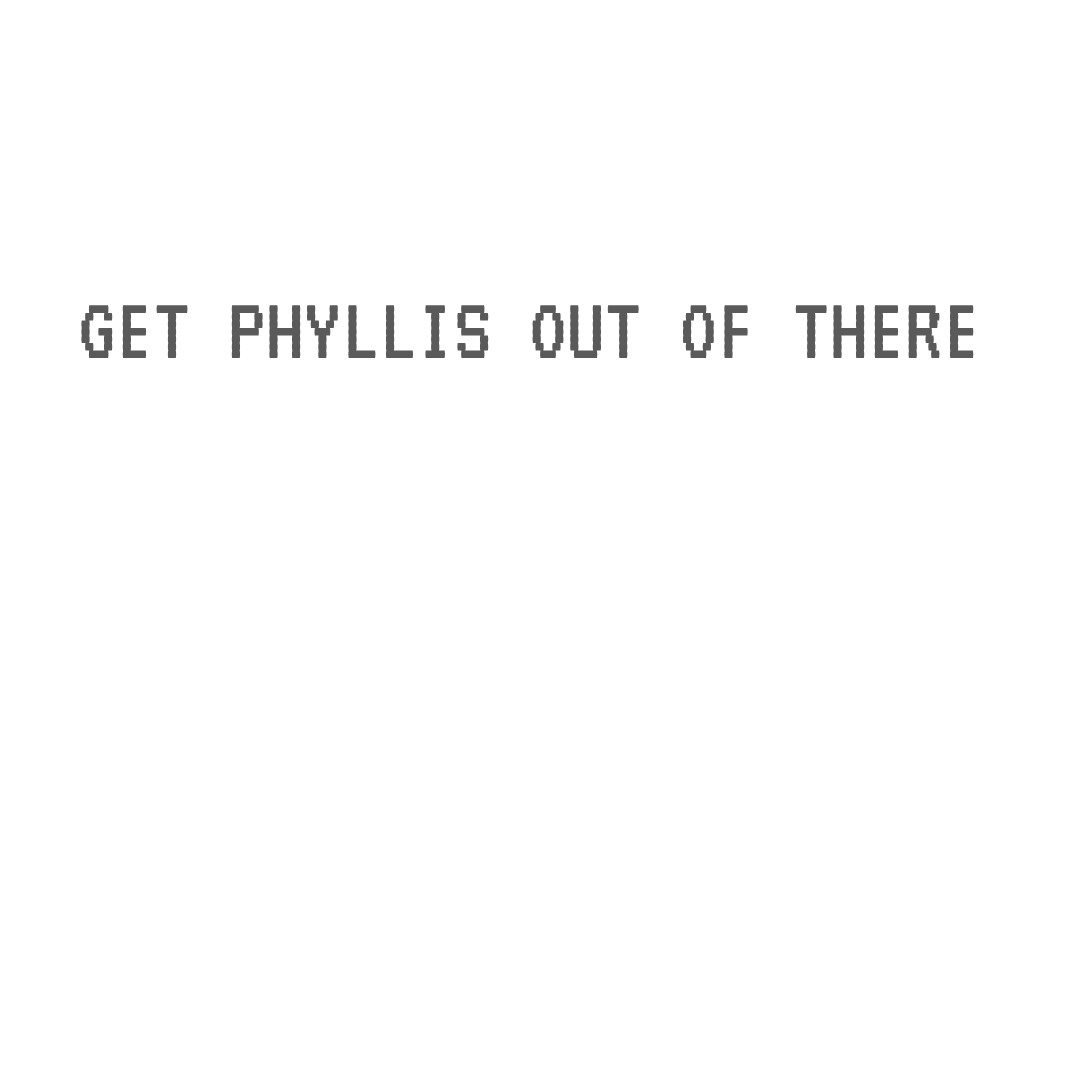
<style>
.page{position:relative;width:1080px;height:1080px;background:#ffffff}
.page>*{position:absolute;margin:0}
.t1{font:94px "VT323-Regular";color:#5a5a5a}
</style>
<div class="page">
<p class="t1" style="left:81px;top:305px;width:893px;height:53px">GET PHYLLIS OUT OF THERE</p>
</div>
